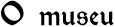
<style>
.page{position:relative;width:115px;height:27px;background:#ffffff}
.page>*{position:absolute;margin:0}
.t1{font:24px "Kelmscott-Regular";letter-spacing:0.05em;color:#000000}
.t2{font:30px "Kelmscott-Regular";letter-spacing:0.05em;color:#000000}
</style>
<div class="page">
<p class="t1" style="left:1px;top:0px;width:113px;height:26px"><span class="t2">O</span> museu</p>
</div>
